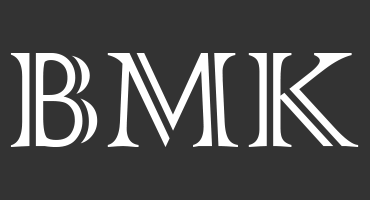
<style>
.page{position:relative;width:370px;height:200px;background:#333333}
.page>*{position:absolute;margin:0}
.t1{font:179.7px "ColonnaMT";color:#ffffff}
</style>
<div class="page">
<p class="t1" style="left:10px;top:53px;width:349px;height:94px">BMK</p>
</div>
